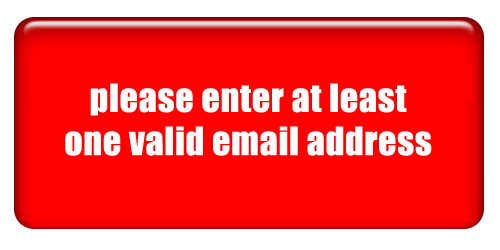
<style>
.page{position:relative;width:500px;height:250px;background:#ff0000}
.page>*{position:absolute;margin:0}
.t1{font:36px "Impact";letter-spacing:0.02em;color:#ffffff}
</style>
<div class="page">
<p class="t1" style="left:65px;top:83px;width:367px;height:73px;text-align:center">please enter at least<br>one valid email address</p>
</div>
